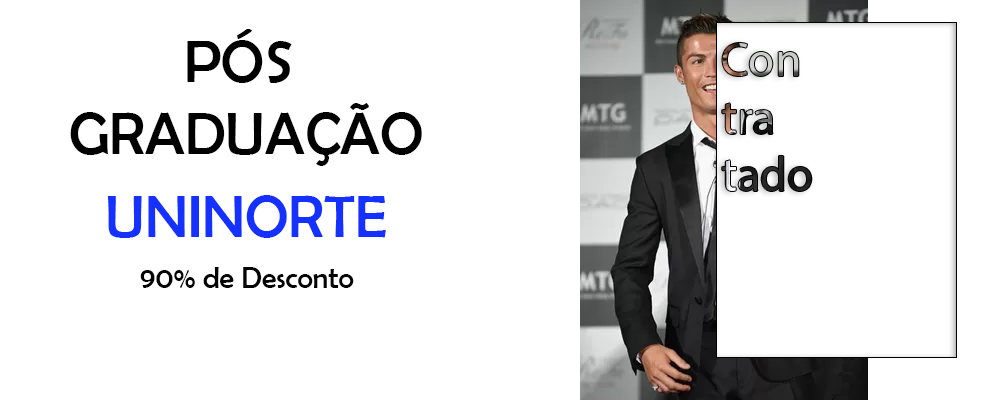
<style>
.page{position:relative;width:1000px;height:400px;background:#ffffff}
.page>*{position:absolute;margin:0}
.t1{font:60px "BerlinSansFB-Reg";color:#000000}
.t2{font:60px "BerlinSansFB-Reg";color:#1531ff}
.t3{font:30px "BerlinSansFB-Reg";color:#040404}
</style>
<div class="page">
<p class="t1" style="left:70px;top:29px;width:352px;height:137px;text-align:center">PÓS <br>GRADUAÇÃO</p>
<p class="t2" style="left:107px;top:195px;width:279px;height:43px">UNINORTE</p>
<p class="t3" style="left:140px;top:267px;width:214px;height:21px">90% de Desconto</p>
</div>
